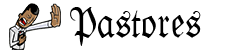
<style>
.page{position:relative;width:250px;height:50px;background:#ffffff}
.page>*{position:absolute;margin:0}
.t1{font:42.1px "Fraktur";color:#000000}
</style>
<div class="page">
<p class="t1" style="left:70px;top:7px;width:131px;height:39px">Pastores</p>
</div>
